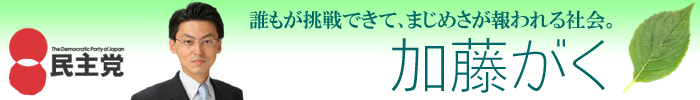
<style>
.page{position:relative;width:700px;height:100px;background:#ffffff}
.page>*{position:absolute;margin:0}
.t1{font:20px "HGPMinchoE";color:#006666}
.t2{font:60px "FMotoyaCedar-W1-90mskp-RKSJ-H";color:#006666}
</style>
<div class="page">
<p class="t1" style="left:250px;top:10px;width:153px;height:19px">誰もが挑戦できて、</p>
<p class="t1" style="left:406px;top:10px;width:206px;height:20px">まじめさが報われる社会。</p>
<p class="t2" style="left:391px;top:38px;width:214px;height:55px">加藤がく</p>
</div>
